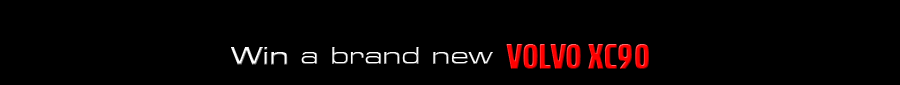
<style>
.page{position:relative;width:900px;height:85px;background:#000000}
.page>*{position:absolute;margin:0}
.t1{font:24px "Square721BT-RomanExtended";color:#ffffff}
.t2{font:24px "Square721BT-RomanExtended";color:#ffffff;font-weight:bold}
.t3{font:36.1px "VolvoBroad";color:#ff0000;scale:1.22 1}
</style>
<div class="page">
<p class="t1" style="left:231px;top:47px;width:262px;height:18px"><span class="t2">Win </span>a brand new</p>
<p class="t3" style="left:506px;top:44px;width:143px;height:25px">VOLVO XC90</p>
</div>
